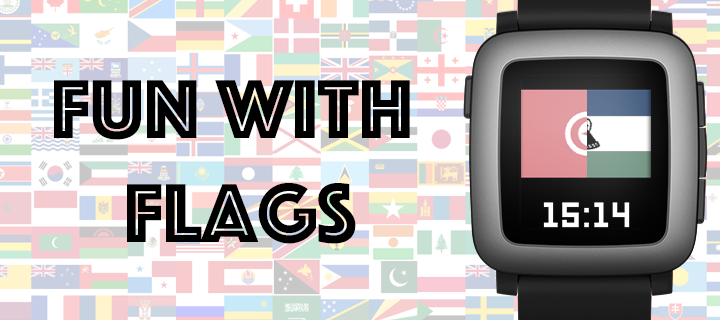
<style>
.page{position:relative;width:720px;height:320px}
.page>*{position:absolute;margin:0}
.t1{font:86.6px "Phosphate-Inline";color:#000000}
</style>
<div class="page">
<p class="t1" style="left:54px;top:80px;width:356px;height:164px;text-align:center">Fun With <br>Flags</p>
</div>
